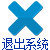
<style>
.page{position:relative;width:50px;height:50px;background:#ffffff}
.page>*{position:absolute;margin:0}
.t1{font:11.8px "SimSun";color:#002fa3}
</style>
<div class="page">
<p class="t1" style="left:2px;top:38px;width:46px;height:12px">退出系统</p>
</div>
